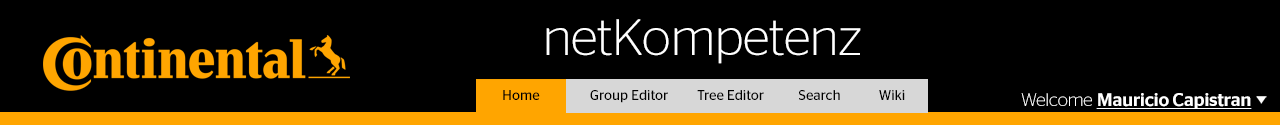
<style>
.page{position:relative;width:1280px;height:125px;background:#000000}
.page>*{position:absolute;margin:0}
.t1{font:51.1px "ContinentalStagSans-Light";color:#ffffff}
.t2{font:14.1px "ContinentalStagSans-Book";color:#000000}
.t3{font:18.1px "ContinentalStagSans-Medium";color:#ffffff;text-decoration:underline}
.t4{font:18.1px "ContinentalStagSans-Light";color:#ffffff}
</style>
<div class="page">
<p class="t1" style="left:546px;top:19px;width:315px;height:45px">netKompetenz</p>
<p class="t2" style="left:503px;top:90px;width:37px;height:10px">Home</p>
<p class="t2" style="left:590px;top:90px;width:78px;height:13px">Group Editor</p>
<p class="t2" style="left:697px;top:90px;width:67px;height:10px">Tree Editor</p>
<p class="t2" style="left:799px;top:90px;width:41px;height:10px">Search</p>
<p class="t2" style="left:879px;top:90px;width:26px;height:10px">Wiki</p>
<p class="t3" style="left:1021px;top:93px;width:231px;height:16px"><span class="t4">Welcome </span>Mauricio Capistran</p>
</div>
